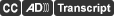
<style>
.page{position:relative;width:114px;height:16px;background:#333333}
.page>*{position:absolute;margin:0}
.t1{font:12.2px "Arial-BoldMT";color:#ffffff;scale:0.87 1}
.t2{font:12.1px "Arial-BoldMT";color:#ffffff}
.t3{font:12px "Arial-BoldMT";color:#ffffff}
.t4{font:11px "Arial-BoldMT";color:#ffffff}
</style>
<div class="page">
<p class="t1" style="left:3px;top:3px;width:15px;height:10px">CC</p>
<p class="t2" style="left:25px;top:3px;width:9px;height:9px">A</p>
<p class="t3" style="left:35px;top:3px;width:8px;height:9px">D</p>
<p class="t4" style="left:57px;top:3px;width:54px;height:11px">Transcript</p>
</div>
